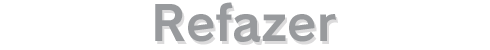
<style>
.page{position:relative;width:490px;height:50px;background:#ffffff}
.page>*{position:absolute;margin:0}
.t1{font:48px "RodinPro-B";color:#989a9d}
</style>
<div class="page">
<p class="t1" style="left:155px;top:2px;width:181px;height:40px">Refazer</p>
</div>
